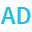
<style>
.page{position:relative;width:32px;height:32px;background:#ffffff}
.page>*{position:absolute;margin:0}
.t1{font:26px "SourceSansPro-Semibold";color:#22bee3}
</style>
<div class="page">
<p class="t1" style="left:1px;top:7px;width:30px;height:17px">AD</p>
</div>
